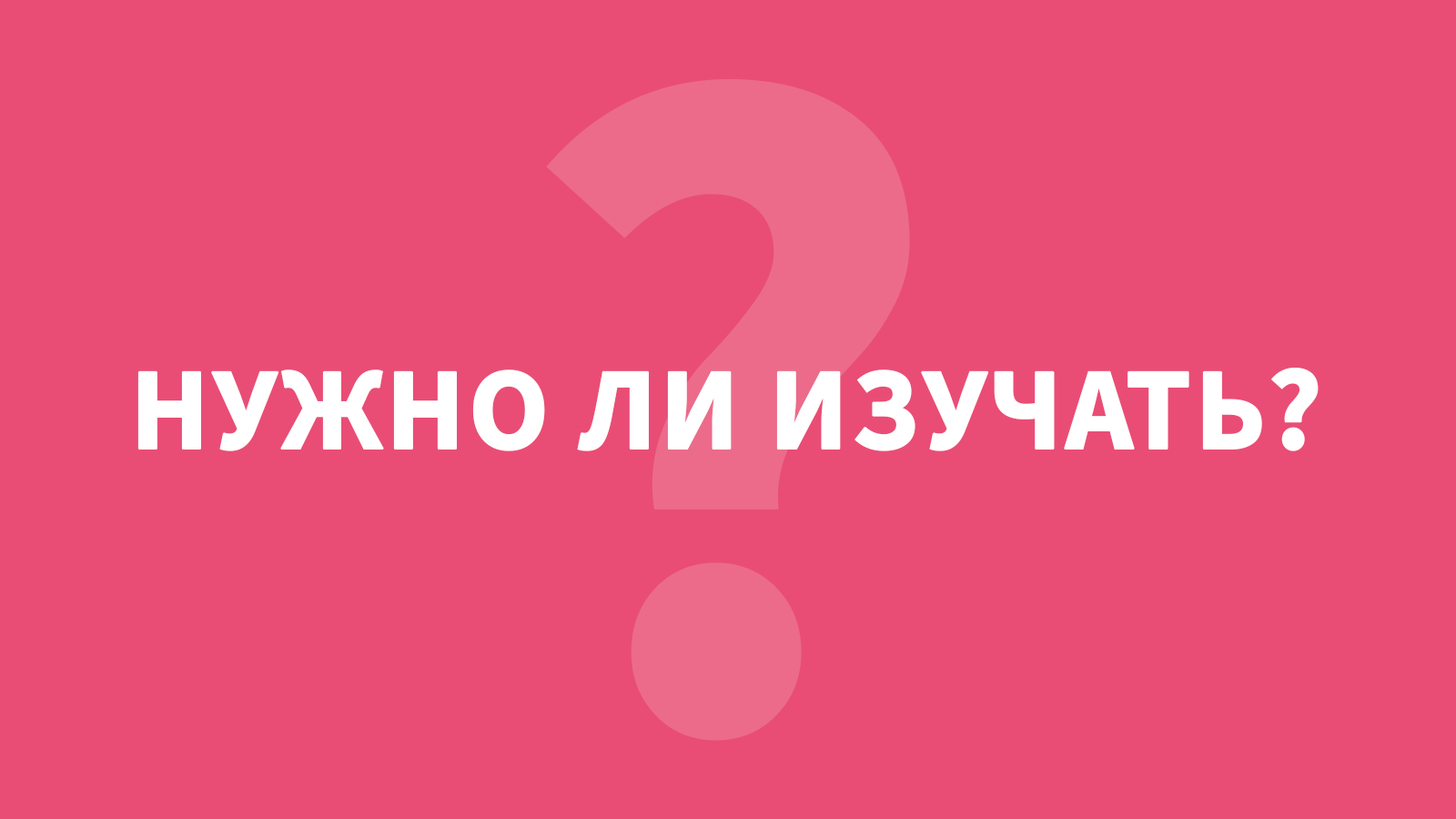
<style>
.page{position:relative;width:1456px;height:819px;background:#e94d75}
.page>*{position:absolute;margin:0}
.t1{font:117.8px "SourceSansPro-Bold";color:#ffffff;text-transform:uppercase;font-weight:bold}
</style>
<div class="page">
<p class="t1" style="left:137px;top:368px;width:1182px;height:83px">Нужно ли изучать?</p>
</div>
